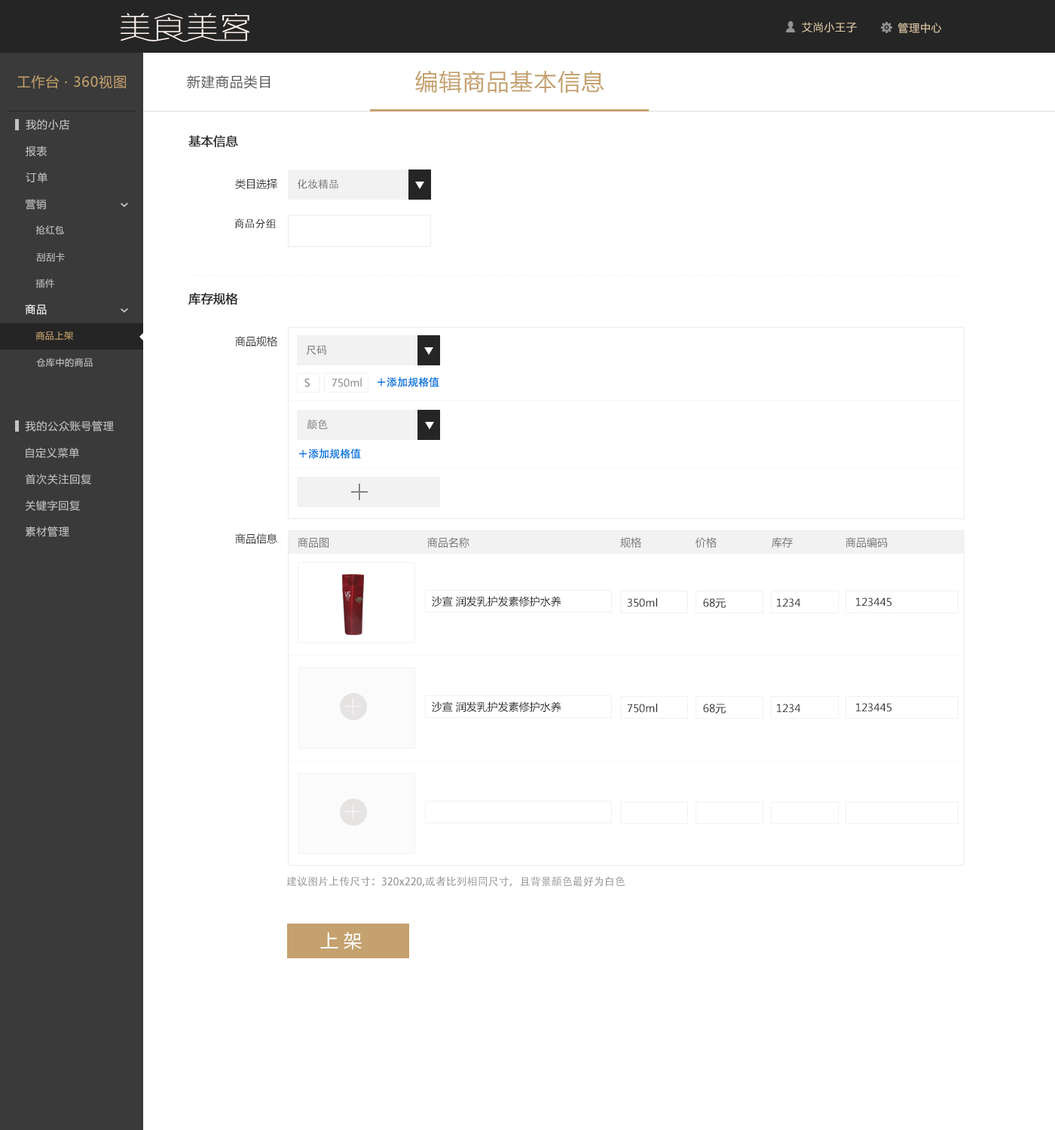
<style>
.page{position:relative;width:1055px;height:1130px;background:#ffffff}
.page>*{position:absolute;margin:0}
.t1{font:10.5px "MicrosoftYaHei";letter-spacing:0.05em;color:#dec7a5}
.t2{font:13.6px "MicrosoftYaHei";letter-spacing:0.05em;color:#c4a16e}
.t3{font:13.6px "MicrosoftYaHei";letter-spacing:0.05em;color:#545050}
.t4{font:22.6px "MicrosoftYaHei";letter-spacing:0.05em;color:#c4a16e}
.t5{font:10.5px "MicrosoftYaHei";letter-spacing:0.05em;color:#c2c2c2}
.t6{font:12.1px "MicrosoftYaHei";color:#252525;font-weight:bold}
.t7{font:10.5px "MicrosoftYaHei";color:#252525}
.t8{font:10.5px "AdobeHeitiStd-Regular";color:#767676}
.t9{font:10.5px "AdobeHeitiStd-Regular";color:#333333}
.t10{font:9px "MicrosoftYaHei";letter-spacing:0.05em;color:#c2c2c2}
.t11{font:10.5px "MicrosoftYaHei";letter-spacing:0.05em;color:#ffffff}
.t12{font:9px "MicrosoftYaHei";letter-spacing:0.05em;color:#c4a16e}
.t13{font:10.5px "AdobeHeitiStd-Regular";color:#0077dd}
.t14{font:10.5px "MicrosoftYaHei";color:#878181}
.t15{font:10.5px "MicrosoftYaHei";color:#767676}
.t16{font:10.5px "AdobeHeitiStd-Regular";color:#999999}
.t17{font:18.1px "MicrosoftYaHei";color:#ffffff}
</style>
<div class="page">
<p class="t1" style="left:802px;top:22px;width:55px;height:10px">艾尚小王子</p>
<p class="t1" style="left:897px;top:23px;width:45px;height:10px">管理中心</p>
<p class="t2" style="left:17px;top:75px;width:109px;height:14px">工作台 · 360视图</p>
<p class="t3" style="left:187px;top:75px;width:83px;height:14px">新建商品类目</p>
<p class="t4" style="left:415px;top:70px;width:189px;height:23px">编辑商品基本信息</p>
<p class="t5" style="left:26px;top:119px;width:44px;height:11px">我的小店</p>
<p class="t6" style="left:188px;top:135px;width:50px;height:13px">基本信息</p>
<p class="t5" style="left:26px;top:145px;width:21px;height:12px">报表</p>
<p class="t5" style="left:26px;top:172px;width:21px;height:11px">订单</p>
<p class="t7" style="left:235px;top:179px;width:42px;height:10px">类目选择</p>
<p class="t8" style="left:297px;top:179px;width:41px;height:10px">化妆精品</p>
<p class="t5" style="left:25px;top:199px;width:22px;height:10px">营销</p>
<p class="t9" style="left:234px;top:219px;width:42px;height:9px">商品分组</p>
<p class="t10" style="left:36px;top:225px;width:28px;height:9px">抢红包</p>
<p class="t10" style="left:36px;top:252px;width:29px;height:10px">刮刮卡</p>
<p class="t10" style="left:35px;top:279px;width:19px;height:9px">插件</p>
<p class="t6" style="left:188px;top:292px;width:50px;height:13px">库存规格</p>
<p class="t11" style="left:25px;top:304px;width:22px;height:11px">商品</p>
<p class="t12" style="left:35px;top:331px;width:38px;height:10px">商品上架</p>
<p class="t7" style="left:235px;top:336px;width:42px;height:11px">商品规格</p>
<p class="t8" style="left:306px;top:345px;width:20px;height:10px">尺码</p>
<p class="t10" style="left:36px;top:358px;width:57px;height:9px">仓库中的商品</p>
<p class="t13" style="left:378px;top:377px;width:61px;height:10px">＋添加规格值</p>
<p class="t14" style="left:304px;top:378px;width:6px;height:9px">S</p>
<p class="t14" style="left:332px;top:378px;width:30px;height:9px">750ml</p>
<p class="t5" style="left:25px;top:420px;width:89px;height:12px">我的公众账号管理</p>
<p class="t8" style="left:307px;top:420px;width:21px;height:10px">颜色</p>
<p class="t5" style="left:26px;top:448px;width:53px;height:10px">自定义菜单</p>
<p class="t13" style="left:299px;top:448px;width:62px;height:11px">＋添加规格值</p>
<p class="t5" style="left:26px;top:474px;width:65px;height:11px">首次关注回复</p>
<p class="t5" style="left:25px;top:500px;width:55px;height:11px">关键字回复</p>
<p class="t5" style="left:26px;top:526px;width:43px;height:11px">素材管理</p>
<p class="t7" style="left:235px;top:534px;width:42px;height:10px">商品信息</p>
<p class="t15" style="left:298px;top:537px;width:31px;height:11px">商品图</p>
<p class="t15" style="left:427px;top:537px;width:42px;height:11px">商品名称</p>
<p class="t15" style="left:620px;top:537px;width:21px;height:11px">规格</p>
<p class="t15" style="left:696px;top:537px;width:21px;height:11px">价格</p>
<p class="t15" style="left:772px;top:537px;width:21px;height:11px">库存</p>
<p class="t15" style="left:845px;top:537px;width:43px;height:11px">商品编码</p>
<p class="t7" style="left:432px;top:596px;width:129px;height:11px">沙宣 润发乳护发素修护水养 750ml 修护损伤滋润发丝</p>
<p class="t7" style="left:627px;top:598px;width:30px;height:9px">350ml</p>
<p class="t7" style="left:703px;top:598px;width:23px;height:11px">68元</p>
<p class="t7" style="left:777px;top:598px;width:23px;height:9px">1234</p>
<p class="t7" style="left:856px;top:598px;width:35px;height:9px">123445</p>
<p class="t7" style="left:432px;top:702px;width:129px;height:11px">沙宣 润发乳护发素修护水养 750ml 修护损伤滋润发丝</p>
<p class="t7" style="left:627px;top:704px;width:30px;height:9px">750ml</p>
<p class="t7" style="left:703px;top:704px;width:23px;height:10px">68元</p>
<p class="t7" style="left:777px;top:704px;width:23px;height:9px">1234</p>
<p class="t7" style="left:856px;top:703px;width:35px;height:9px">123445</p>
<p class="t16" style="left:286px;top:876px;width:339px;height:12px">建议图片上传尺寸：320x220,或者比列相同尺寸，且背景颜色最好为白色</p>
<p class="t17" style="left:320px;top:932px;width:42px;height:18px">上 架</p>
</div>
